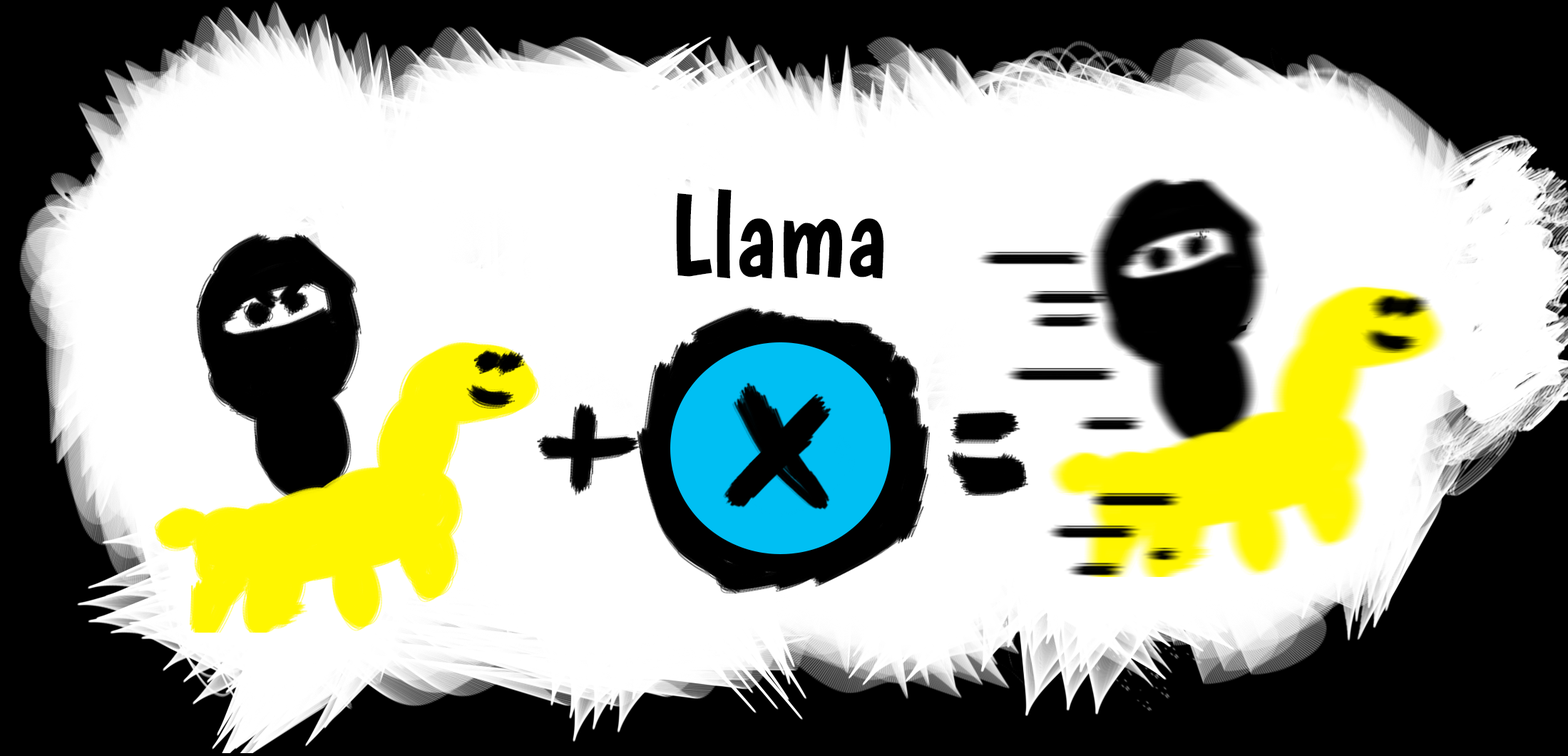
<style>
.page{position:relative;width:1568px;height:756px;background:#ffffff}
.page>*{position:absolute;margin:0}
.t1{font:118.8px "Boogaloo-Regular";color:#000000;scale:0.9 1}
</style>
<div class="page">
<p class="t1" style="left:676px;top:189px;width:207px;height:90px">Llama</p>
</div>
